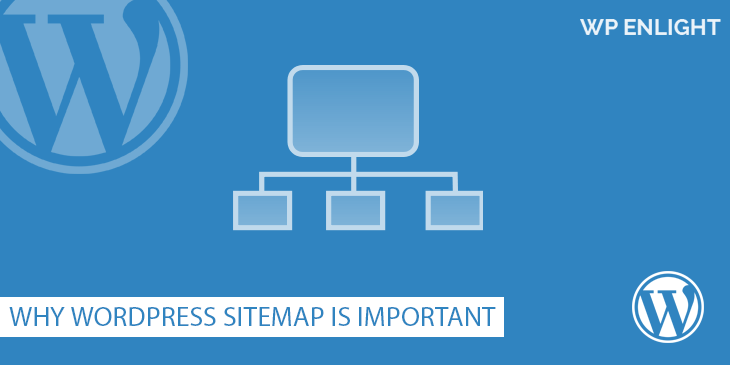
<style>
.page{position:relative;width:730px;height:365px;background:#3084c0}
.page>*{position:absolute;margin:0}
.t1{font:27.6px "MyriadPro-Regular";letter-spacing:0.01em;color:#3084c0}
</style>
<div class="page">
<p class="t1" style="left:9px;top:307px;width:487px;height:19px">WHY WORDPRESS SITEMAP IS IMPORTANT</p>
</div>
